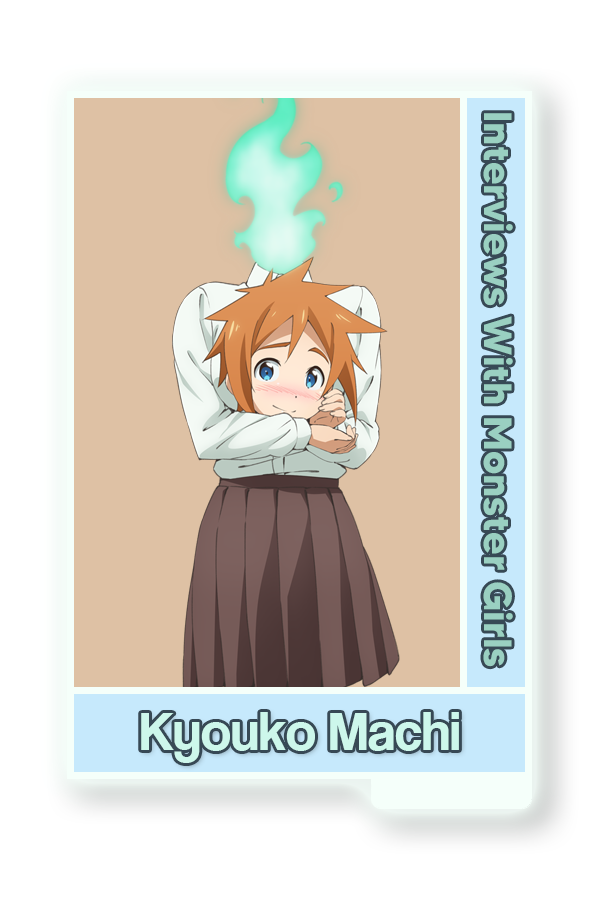
<style>
.page{position:relative;width:600px;height:900px;background:#dec1a4}
.page>*{position:absolute;margin:0}
.t1{font:39.2px "MADETOMMY-Bold";color:#9ad0c1}
.t2{font:56.1px "CoolveticaRg-Regular";color:#cdf7eb}
</style>
<div class="page">
<p class="t1" style="left:483px;top:113px;width:30px;height:554px;rotate:90deg">Interviews With Monster Girls</p>
<p class="t2" style="left:141px;top:712px;width:318px;height:51px">Kyouko Machi</p>
</div>
